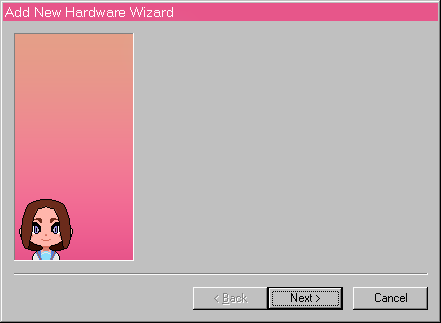
<style>
.page{position:relative;width:441px;height:323px;background:#c0c0c0}
.page>*{position:absolute;margin:0}
.t1{font:14px "MicrosoftSansSerif";color:#ffffff}
</style>
<div class="page">
<p class="t1" style="left:5px;top:7px;width:168px;height:10px">Add New Hardware Wizard</p>
</div>
